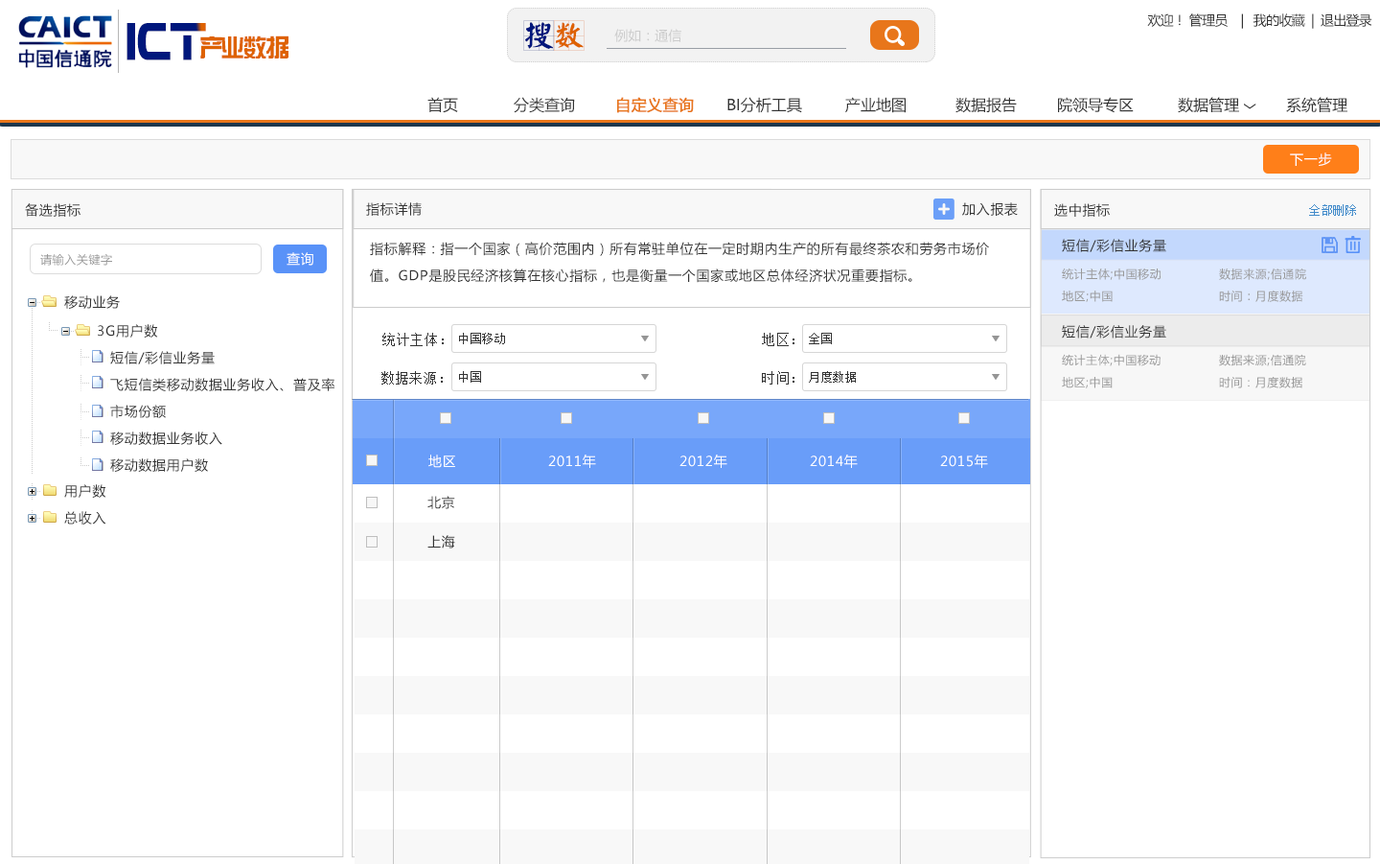
<style>
.page{position:relative;width:1380px;height:864px;background:#ffffff}
.page>*{position:absolute;margin:0}
.t1{font:13.4px "MicrosoftYaHei";letter-spacing:-0.05em;color:#333333}
.t2{font:42.7px "BoomBox";color:#001966}
.t3{font:42.7px "BoomBox";letter-spacing:-0.1em;color:#001966}
.t4{font:30.2px "YankaigungEG-Ultra-GB";color:#00177c}
.t5{font:30.2px "YankaigungEG-Ultra-GB";color:#de6200}
.t6{font:13.4px "MicrosoftYaHei";color:#cccccc}
.t7{font:24.7px "FZZYJW--GB1-0";letter-spacing:-0.08em;color:#de6200}
.t8{font:24.7px "FZZYJW--GB1-0";letter-spacing:-0.14em;color:#de6200}
.t9{font:15.3px "MicrosoftYaHei";color:#333333}
.t10{font:15.3px "MicrosoftYaHei";color:#e8761b;font-weight:bold}
.t11{font:15.3px "MicrosoftYaHei";color:#333333;scale:0.8 1}
.t12{font:13.4px "MicrosoftYaHei";letter-spacing:0.05em;color:#ffffff}
.t13{font:13.4px "MicrosoftYaHei";letter-spacing:0.05em;color:#333333}
.t14{font:11.5px "SimSun";letter-spacing:0.05em;color:#428bca}
.t15{font:13.4px/26.8px "MicrosoftYaHei";letter-spacing:0.05em;color:#333333}
.t16{font:11.5px "MicrosoftYaHei";letter-spacing:0.05em;color:#999999}
.t17{font:13.5px "MicrosoftYaHei";letter-spacing:0.05em;color:#333333}
.t18{font:13.4px "SimSun";letter-spacing:0.05em;color:#333333}
.t19{font:11.5px "SimSun";letter-spacing:0.05em;color:#333333}
</style>
<div class="page">
<p class="t1" style="left:1148px;top:13px;width:225px;height:16px">欢迎！ 管理员    |   我的收藏  |  退出登录</p>
<p class="t2" style="left:127px;top:23px;width:79px;height:37px">IC<span class="t3">T</span></p>
<p class="t4" style="left:523px;top:20px;width:62px;height:31px">搜<span class="t5">数</span></p>
<p class="t6" style="left:615px;top:29px;width:67px;height:13px">例如：通信</p>
<p class="t7" style="left:200px;top:35px;width:89px;height:23px"><span class="t8">产</span>业数据</p>
<p class="t9" style="left:428px;top:97px;width:30px;height:16px">首页</p>
<p class="t9" style="left:514px;top:97px;width:61px;height:16px">分类查询</p>
<p class="t10" style="left:617px;top:97px;width:77px;height:16px">自定义查询</p>
<p class="t9" style="left:728px;top:97px;width:74px;height:16px">BI分析工具</p>
<p class="t9" style="left:846px;top:97px;width:60px;height:16px">产业地图</p>
<p class="t9" style="left:956px;top:97px;width:61px;height:16px">数据报告</p>
<p class="t9" style="left:1058px;top:97px;width:76px;height:16px">院领导专区</p>
<p class="t9" style="left:1178px;top:97px;width:79px;height:16px">数据管理 <span class="t11">﹀</span></p>
<p class="t9" style="left:1287px;top:97px;width:61px;height:16px">系统管理</p>
<p class="t12" style="left:1290px;top:152px;width:43px;height:14px">下一步</p>
<p class="t13" style="left:25px;top:203px;width:56px;height:14px">备选指标</p>
<p class="t13" style="left:366px;top:202px;width:56px;height:14px">指标详情</p>
<p class="t13" style="left:963px;top:202px;width:55px;height:14px">加入报表</p>
<p class="t13" style="left:1055px;top:203px;width:55px;height:14px">选中指标</p>
<p class="t14" style="left:1310px;top:204px;width:47px;height:12px">全部删除</p>
<p class="t15" style="left:370px;top:242px;width:619px;height:41px">指标解释：指一个国家（高价范围内）所有常驻单位在一定时期内生产的所有最终茶农和劳务市场价值。GDP是股民经济核算在核心指标，也是衡量一个国家或地区总体经济状况重要指标。</p>
<p class="t13" style="left:1062px;top:239px;width:105px;height:13px">短信/彩信业务量</p>
<p class="t16" style="left:40px;top:253px;width:72px;height:13px">请输入关键字</p>
<p class="t12" style="left:287px;top:252px;width:26px;height:14px">查询</p>
<p class="t16" style="left:1062px;top:267px;width:99px;height:13px">统计主体;中国移动</p>
<p class="t16" style="left:1219px;top:268px;width:88px;height:12px">数据来源;信通院</p>
<p class="t16" style="left:1062px;top:290px;width:51px;height:12px">地区;中国</p>
<p class="t16" style="left:1219px;top:290px;width:85px;height:12px">时间：月度数据</p>
<p class="t13" style="left:64px;top:295px;width:56px;height:14px">移动业务</p>
<p class="t13" style="left:98px;top:324px;width:60px;height:13px">3G用户数</p>
<p class="t17" style="left:1062px;top:325px;width:105px;height:13px">短信/彩信业务量</p>
<p class="t18" style="left:383px;top:333px;width:61px;height:13px">统计主体：</p>
<p class="t19" style="left:459px;top:333px;width:46px;height:11px">中国移动</p>
<p class="t18" style="left:762px;top:333px;width:33px;height:13px">地区：</p>
<p class="t19" style="left:809px;top:333px;width:23px;height:11px">全国</p>
<p class="t15" style="left:110px;top:351px;width:225px;height:121px">短信/彩信业务量<br>飞短信类移动数据业务收入、普及率<br>市场份额<br>移动数据业务收入<br>移动数据用户数</p>
<p class="t16" style="left:1062px;top:354px;width:99px;height:12px">统计主体;中国移动</p>
<p class="t16" style="left:1219px;top:354px;width:88px;height:12px">数据来源;信通院</p>
<p class="t18" style="left:382px;top:371px;width:61px;height:13px">数据来源：</p>
<p class="t19" style="left:459px;top:371px;width:22px;height:12px">中国</p>
<p class="t18" style="left:762px;top:371px;width:33px;height:13px">时间：</p>
<p class="t19" style="left:809px;top:371px;width:47px;height:12px">月度数据</p>
<p class="t16" style="left:1062px;top:377px;width:51px;height:11px">地区;中国</p>
<p class="t16" style="left:1219px;top:377px;width:84px;height:11px">时间：月度数据</p>
<p class="t12" style="left:429px;top:454px;width:26px;height:14px">地区</p>
<p class="t12" style="left:548px;top:454px;width:48px;height:14px">2011年</p>
<p class="t12" style="left:680px;top:454px;width:48px;height:14px">2012年</p>
<p class="t12" style="left:810px;top:454px;width:48px;height:14px">2014年</p>
<p class="t12" style="left:940px;top:454px;width:48px;height:14px">2015年</p>
<p class="t15" style="left:64px;top:484px;width:42px;height:40px">用户数<br>总收入</p>
<p class="t13" style="left:428px;top:496px;width:27px;height:13px">北京</p>
<p class="t13" style="left:428px;top:535px;width:27px;height:13px">上海</p>
</div>
